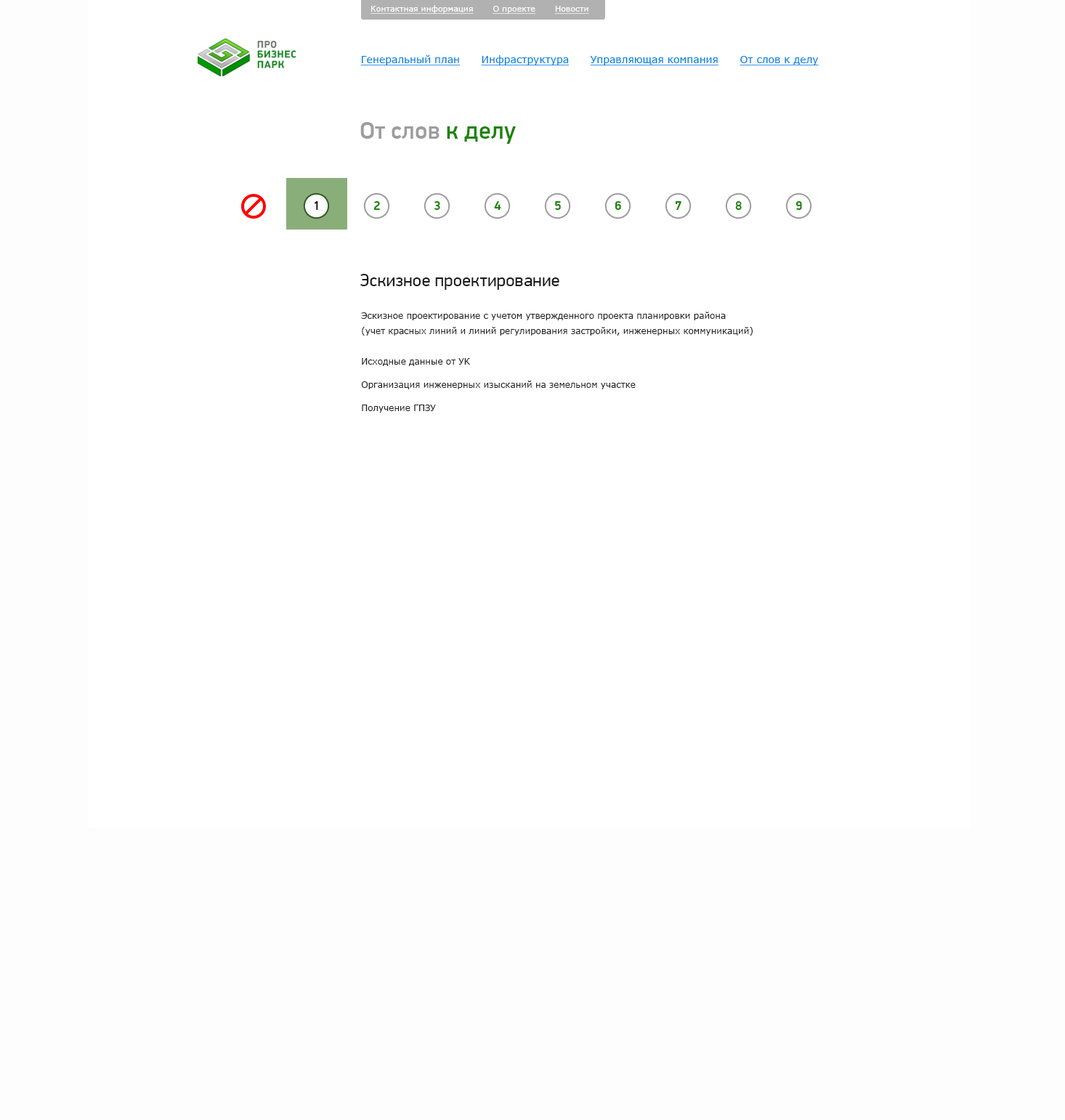
<style>
.page{position:relative;width:1065px;height:1120px;background:#ffffff}
.page>*{position:absolute;margin:0}
.t1{font:8px "Verdana";color:#ffffff;text-decoration:underline}
.t2{font:10.2px "Verdana";color:#0084e2;text-decoration:underline}
.t3{font:10.2px "Verdana";color:#0084e2}
.t4{font:24.7px "PFDinDisplayPro-Medium";color:#9d9d9d}
.t5{font:24.7px "PFDinDisplayPro-Medium";color:#1e830a}
.t6{font:13.1px "PFDinDisplayPro-Bold";color:#1b1b1b}
.t7{font:13.1px "PFDinDisplayPro-Bold";color:#1e830a}
.t8{font:18.2px "PFDinDisplayPro-Regular";color:#1b1b1b}
.t9{font:8.7px/15.3px "Verdana";color:#222222}
.t10{font:8.7px/23.2px "Verdana";color:#222222}
</style>
<div class="page">
<p class="t1" style="left:370px;top:5px;width:219px;height:9px">Контактная информация       О проекте       Новости</p>
<p class="t2" style="left:360px;top:55px;width:459px;height:11px"><span class="t3">      </span>Генеральный план      Инфраструктура      Управляющая компания      От слов к делу</p>
<p class="t4" style="left:360px;top:122px;width:156px;height:22px">От слов <span class="t5">к делу</span></p>
<p class="t6" style="left:314px;top:201px;width:4px;height:9px">1</p>
<p class="t7" style="left:374px;top:201px;width:6px;height:9px">2</p>
<p class="t7" style="left:434px;top:201px;width:6px;height:9px">3</p>
<p class="t7" style="left:494px;top:201px;width:7px;height:9px">4</p>
<p class="t7" style="left:555px;top:201px;width:6px;height:9px">5</p>
<p class="t7" style="left:615px;top:201px;width:6px;height:9px">6</p>
<p class="t7" style="left:675px;top:201px;width:6px;height:9px">7</p>
<p class="t7" style="left:735px;top:201px;width:7px;height:9px">8</p>
<p class="t7" style="left:795px;top:201px;width:7px;height:9px">9</p>
<p class="t8" style="left:360px;top:274px;width:199px;height:16px">Эскизное проектирование</p>
<p class="t9" style="left:361px;top:312px;width:391px;height:101px">Эскизное проектирование с учетом утвержденного проекта планировки района <br>(учет красных линий и линий регулирования застройки, инженерных коммуникаций)<br><br>Исходные данные от УК<br><span class="t10">Организация инженерных изысканий на земельном участке<br>Получение ГПЗУ</span></p>
</div>
